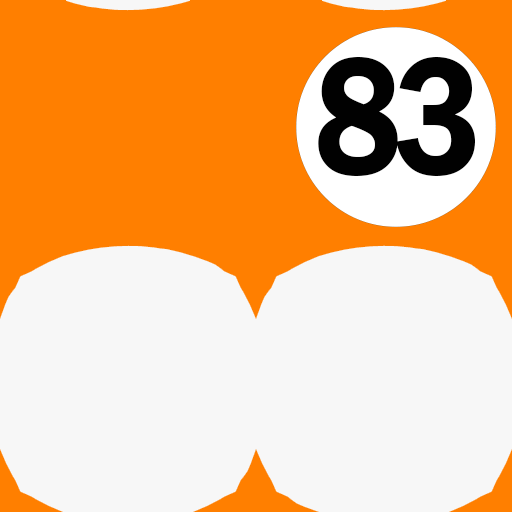
<style>
.page{position:relative;width:512px;height:512px;background:#f7f7f7}
.page>*{position:absolute;margin:0}
.t1{font:172.5px "FranklinGothic-Demi";letter-spacing:-0.05em;color:#010101;scale:0.87 1}
</style>
<div class="page">
<p class="t1" style="left:318px;top:57px;width:157px;height:119px">83</p>
</div>
